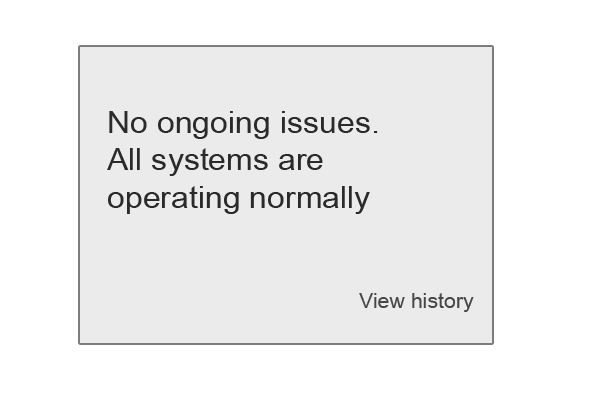
<style>
.page{position:relative;width:600px;height:400px;background:#ebebeb}
.page>*{position:absolute;margin:0}
.t1{font:31.2px "ArialNarrow";color:#2a2a2a;scale:1.25 1}
.t2{font:20.8px "ArialNarrow";color:#474747;scale:1.25 1}
</style>
<div class="page">
<p class="t1" style="left:107px;top:111px;width:367px;height:201px">No ongoing issues.<br>All systems are<br>operating normally<br><br>     <span class="t2">            <br>       View history</span></p>
</div>
